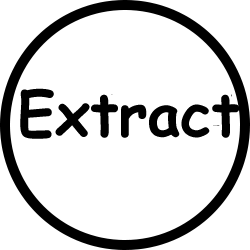
<style>
.page{position:relative;width:250px;height:250px;background:#ffffff}
.page>*{position:absolute;margin:0}
.t1{font:60px "ComicSansMS-Bold";color:#000000}
</style>
<div class="page">
<p class="t1" style="left:20px;top:88px;width:220px;height:51px">Extract</p>
</div>
